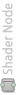
<style>
.page{position:relative;width:16px;height:95px;background:#ffffff}
.page>*{position:absolute;margin:0}
.t1{font:14px "MyriadPro-Regular";color:#c8c8c8;font-weight:bold;scale:0.9 1}
</style>
<div class="page">
<p class="t1" style="left:2px;top:3px;width:11px;height:72px;rotate:-90deg">Shader Node</p>
</div>
